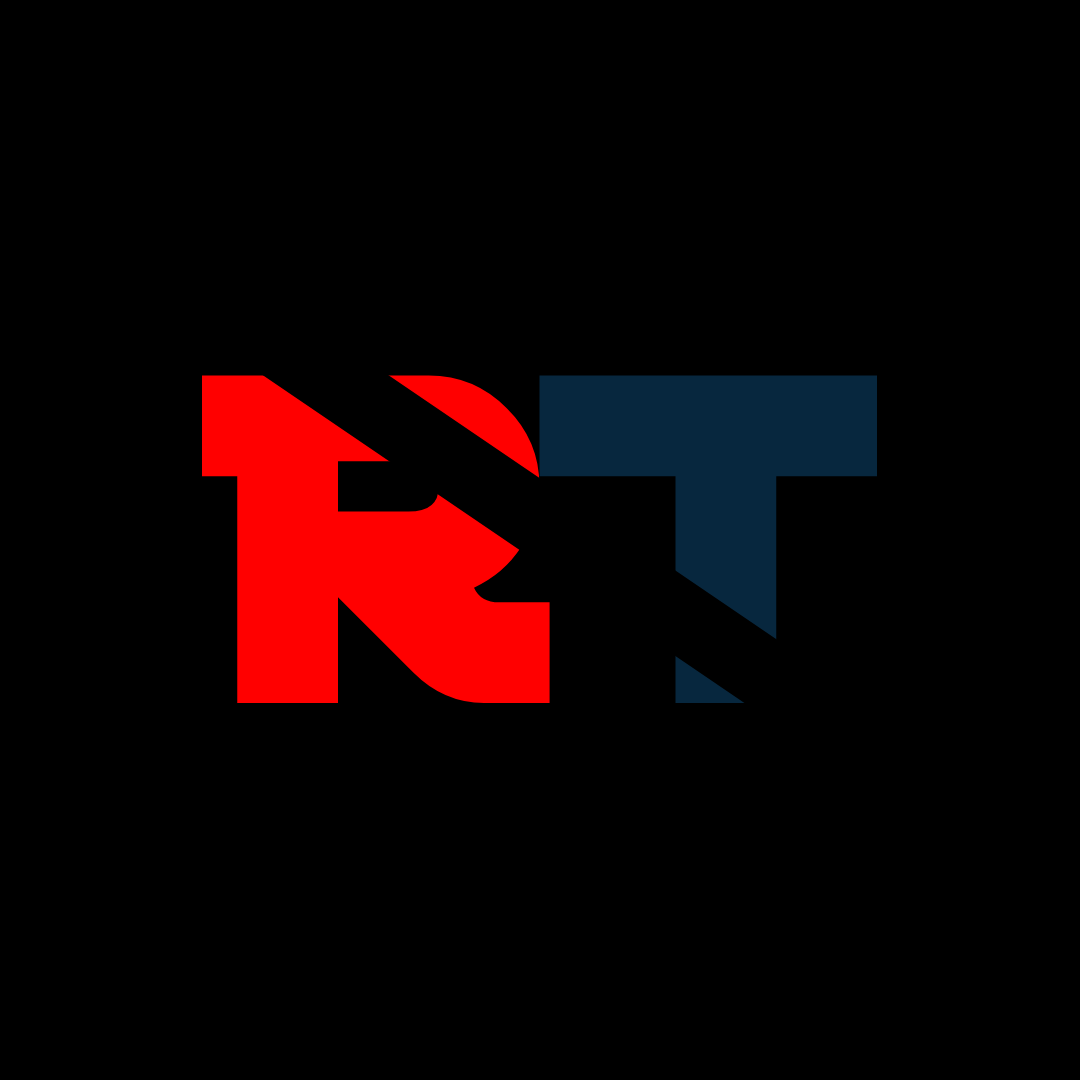
<style>
.page{position:relative;width:1080px;height:1080px;background:#000000}
.page>*{position:absolute;margin:0}
.t1{font:503.7px "DistantGalaxy";color:#ff0000}
.t2{font:503.7px "DistantGalaxy";color:#07273e}
</style>
<div class="page">
<p class="t1" style="left:202px;top:375px;width:675px;height:328px">R<span class="t2">T</span></p>
</div>
